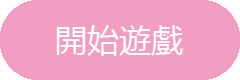
<style>
.page{position:relative;width:240px;height:80px;background:#f19ec2}
.page>*{position:absolute;margin:0}
.t1{font:32px "MicrosoftYaHei";color:#ffffff}
</style>
<div class="page">
<p class="t1" style="left:56px;top:25px;width:127px;height:31px">開始遊戲</p>
</div>
